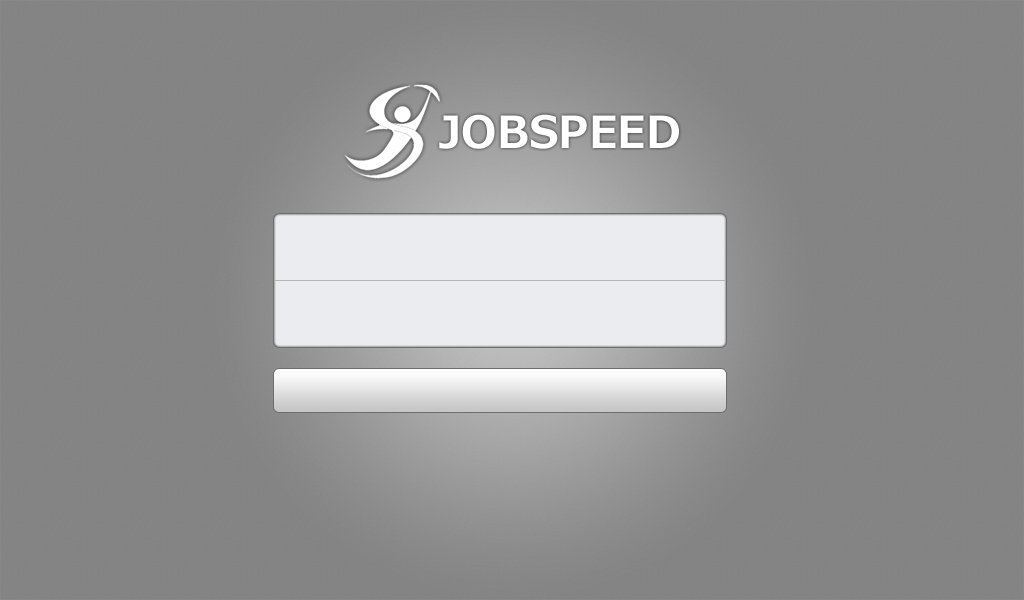
<style>
.page{position:relative;width:1024px;height:600px;background:#848484}
.page>*{position:absolute;margin:0}
.t1{font:44px "MeiryoUI-Bold";color:#ffffff}
</style>
<div class="page">
<p class="t1" style="left:439px;top:114px;width:240px;height:35px">JOBSPEED</p>
</div>
